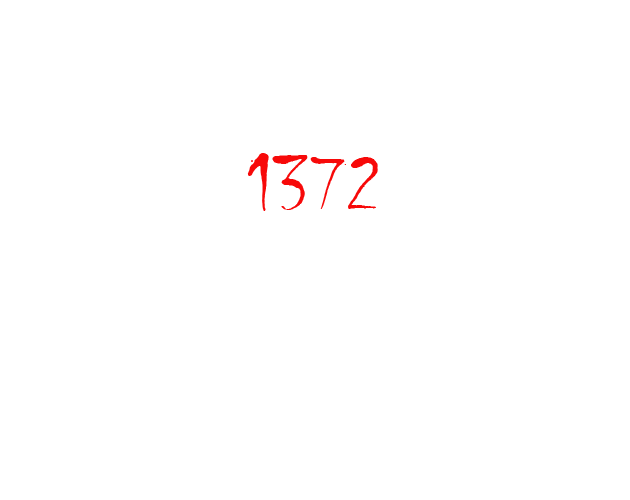
<style>
.page{position:relative;width:630px;height:500px;background:#ffffff}
.page>*{position:absolute;margin:0}
.t1{font:83.3px "Chiller-Regular";color:#f80909}
</style>
<div class="page">
<p class="t1" style="left:247px;top:153px;width:131px;height:58px">1372</p>
</div>
